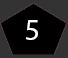
<style>
.page{position:relative;width:68px;height:58px;background:#000000}
.page>*{position:absolute;margin:0}
.t1{font:30px "MyriadPro-Regular";color:#ffffff}
</style>
<div class="page">
<p class="t1" style="left:25px;top:20px;width:13px;height:20px">5</p>
</div>
